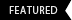
<style>
.page{position:relative;width:72px;height:20px;background:#000000}
.page>*{position:absolute;margin:0}
.t1{font:11px "MyriadPro-Regular";letter-spacing:0.06em;color:#e7e7e7;scale:0.9 1}
</style>
<div class="page">
<p class="t1" style="left:9px;top:6px;width:49px;height:8px">FEATURED</p>
</div>
